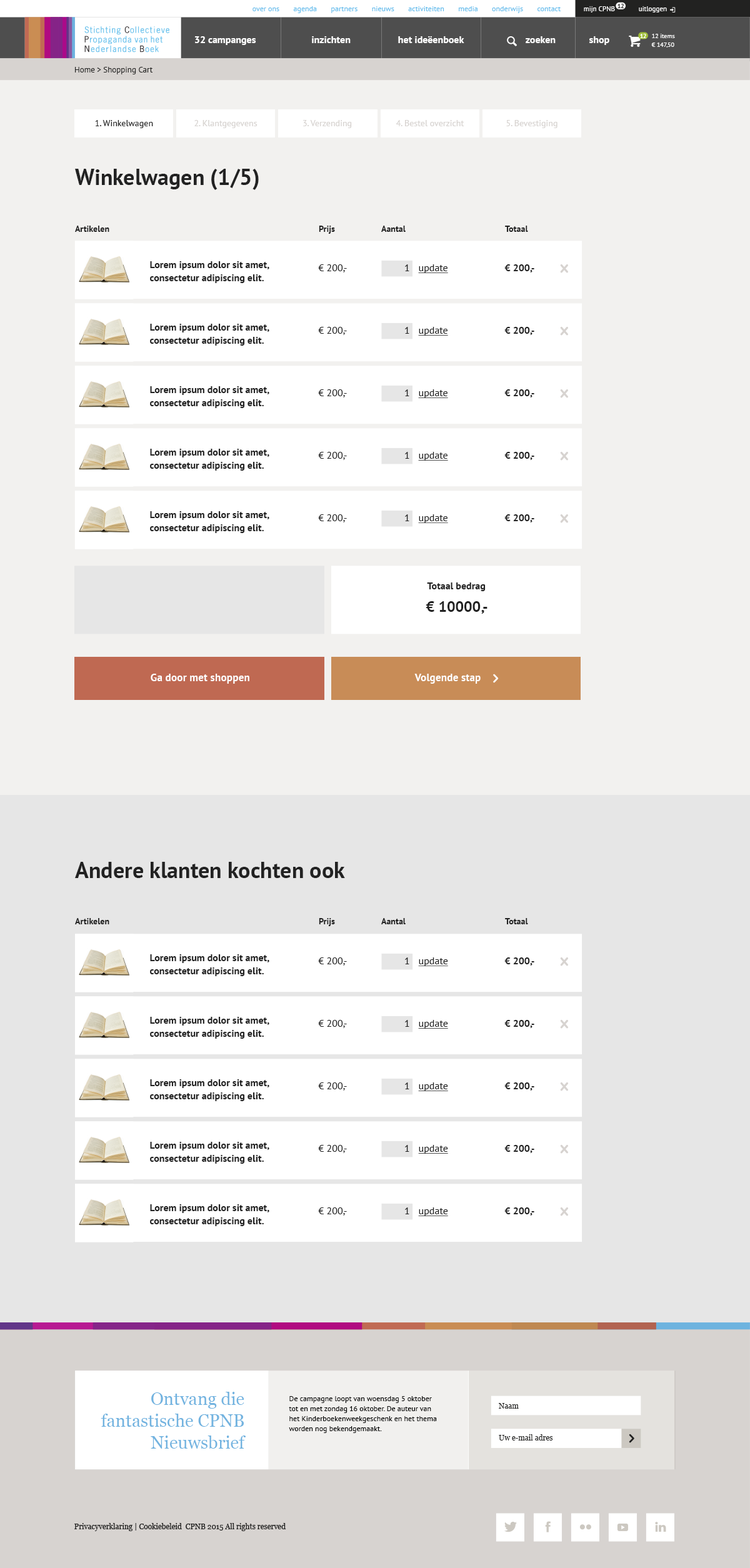
<style>
.page{position:relative;width:750px;height:1568px;background:#ffffff}
.page>*{position:absolute;margin:0}
.t1{font:6.2px "PTSans-Bold";letter-spacing:-0.05em;color:#222221}
.t2{font:7.5px "PTSans-Regular";color:#65bdec}
.t3{font:6.9px "PTSans-Regular";color:#ffffff}
.t4{font:10px "PTSans-Bold";color:#ffffff}
.t5{font:6.2px "PTSans-Bold";letter-spacing:-0.05em;color:#ffffff}
.t6{font:6.2px/8.7px "PTSans-Regular";color:#ffffff}
.t7{font:8.1px "PTSans-Regular";color:#222221}
.t8{font:8.7px "PTSans-Regular";color:#222222}
.t9{font:8.7px "PTSans-Regular";color:#d7d3d0}
.t10{font:22.5px "PTSans-Bold";color:#222222}
.t11{font:8.7px "PTSans-Bold";color:#222222}
.t12{font:10px/13.1px "PTSans-Bold";color:#222222}
.t13{font:10px "PTSans-Regular";color:#222222}
.t14{font:10px "PTSans-Regular";color:#222222;text-decoration:underline}
.t15{font:10px "PTSans-Bold";color:#222222}
.t16{font:10px/22.5px "PTSans-Bold";color:#222222}
.t17{font:15px/22.5px "PTSans-Bold";color:#222222}
.t18{font:10.9px "PTSans-Bold";color:#ffffff}
.t19{font:17.5px/21.9px "Georgia";color:#5daadc}
.t20{font:7.5px/10px "PTSans-Regular";color:#000000}
.t21{font:7.5px "Georgia";color:#222221}
</style>
<div class="page">
<p class="t1" style="left:617px;top:4px;width:7px;height:4px">12</p>
<p class="t2" style="left:252px;top:6px;width:309px;height:7px">over ons       agenda       partners       nieuws       activiteiten       media       onderwijs       contact</p>
<p class="t3" style="left:584px;top:6px;width:31px;height:6px">mijn CPNB</p>
<p class="t3" style="left:639px;top:6px;width:28px;height:6px">uitloggen</p>
<p class="t4" style="left:195px;top:36px;width:61px;height:9px">32 campanges</p>
<p class="t4" style="left:312px;top:36px;width:39px;height:7px">inzichten</p>
<p class="t4" style="left:398px;top:36px;width:66px;height:7px">het ideëenboek</p>
<p class="t4" style="left:526px;top:36px;width:30px;height:7px">zoeken</p>
<p class="t4" style="left:589px;top:36px;width:20px;height:9px">shop</p>
<p class="t5" style="left:640px;top:34px;width:6px;height:4px">12</p>
<p class="t6" style="left:651px;top:34px;width:24px;height:13px">12 items<br>€ 147,50</p>
<p class="t7" style="left:75px;top:67px;width:78px;height:7px">Home &gt; Shopping Cart</p>
<p class="t8" style="left:95px;top:120px;width:58px;height:8px">1. Winkelwagen</p>
<p class="t9" style="left:194px;top:120px;width:63px;height:8px">2. Klantgegevens</p>
<p class="t9" style="left:303px;top:120px;width:49px;height:8px">3. Verzending</p>
<p class="t9" style="left:396px;top:120px;width:68px;height:6px">4. Bestel overzicht</p>
<p class="t9" style="left:506px;top:120px;width:51px;height:8px">5. Bevestiging</p>
<p class="t10" style="left:75px;top:169px;width:184px;height:21px">Winkelwagen (1/5)</p>
<p class="t11" style="left:75px;top:226px;width:34px;height:6px">Artikelen</p>
<p class="t11" style="left:319px;top:226px;width:16px;height:8px">Prijs</p>
<p class="t11" style="left:381px;top:226px;width:25px;height:6px">Aantal</p>
<p class="t11" style="left:505px;top:226px;width:23px;height:6px">Totaal</p>
<p class="t12" style="left:150px;top:261px;width:119px;height:22px">Lorem ipsum dolor sit amet, <br>consectetur adipiscing elit.</p>
<p class="t13" style="left:318px;top:264px;width:29px;height:8px">€ 200,-</p>
<p class="t13" style="left:405px;top:264px;width:4px;height:7px">1</p>
<p class="t14" style="left:418px;top:264px;width:30px;height:9px">update</p>
<p class="t15" style="left:504px;top:264px;width:30px;height:8px">€ 200,-</p>
<p class="t12" style="left:150px;top:324px;width:119px;height:22px">Lorem ipsum dolor sit amet, <br>consectetur adipiscing elit.</p>
<p class="t13" style="left:318px;top:327px;width:29px;height:8px">€ 200,-</p>
<p class="t13" style="left:405px;top:327px;width:4px;height:7px">1</p>
<p class="t14" style="left:418px;top:327px;width:30px;height:9px">update</p>
<p class="t15" style="left:504px;top:327px;width:30px;height:8px">€ 200,-</p>
<p class="t12" style="left:150px;top:386px;width:119px;height:22px">Lorem ipsum dolor sit amet, <br>consectetur adipiscing elit.</p>
<p class="t13" style="left:318px;top:389px;width:29px;height:8px">€ 200,-</p>
<p class="t13" style="left:405px;top:389px;width:4px;height:7px">1</p>
<p class="t14" style="left:418px;top:389px;width:30px;height:9px">update</p>
<p class="t15" style="left:504px;top:389px;width:30px;height:8px">€ 200,-</p>
<p class="t12" style="left:150px;top:449px;width:119px;height:22px">Lorem ipsum dolor sit amet, <br>consectetur adipiscing elit.</p>
<p class="t13" style="left:318px;top:452px;width:29px;height:8px">€ 200,-</p>
<p class="t13" style="left:405px;top:452px;width:4px;height:7px">1</p>
<p class="t14" style="left:418px;top:452px;width:30px;height:9px">update</p>
<p class="t15" style="left:504px;top:452px;width:30px;height:8px">€ 200,-</p>
<p class="t12" style="left:150px;top:511px;width:119px;height:22px">Lorem ipsum dolor sit amet, <br>consectetur adipiscing elit.</p>
<p class="t13" style="left:318px;top:514px;width:29px;height:8px">€ 200,-</p>
<p class="t13" style="left:405px;top:514px;width:4px;height:7px">1</p>
<p class="t14" style="left:418px;top:514px;width:30px;height:9px">update</p>
<p class="t15" style="left:504px;top:514px;width:30px;height:8px">€ 200,-</p>
<p class="t16" style="left:426px;top:582px;width:61px;height:32px;text-align:center">Totaal bedrag<br><span class="t17">€ 10000,-</span></p>
<p class="t18" style="left:151px;top:674px;width:98px;height:10px">Ga door met shoppen</p>
<p class="t18" style="left:414px;top:674px;width:67px;height:10px">Volgende stap</p>
<p class="t10" style="left:75px;top:862px;width:270px;height:16px">Andere klanten kochten ook</p>
<p class="t11" style="left:75px;top:918px;width:34px;height:6px">Artikelen</p>
<p class="t11" style="left:319px;top:918px;width:16px;height:8px">Prijs</p>
<p class="t11" style="left:381px;top:918px;width:25px;height:6px">Aantal</p>
<p class="t11" style="left:505px;top:918px;width:23px;height:6px">Totaal</p>
<p class="t12" style="left:150px;top:954px;width:119px;height:22px">Lorem ipsum dolor sit amet, <br>consectetur adipiscing elit.</p>
<p class="t13" style="left:318px;top:957px;width:29px;height:9px">€ 200,-</p>
<p class="t13" style="left:405px;top:957px;width:4px;height:7px">1</p>
<p class="t14" style="left:418px;top:957px;width:30px;height:9px">update</p>
<p class="t15" style="left:504px;top:957px;width:30px;height:9px">€ 200,-</p>
<p class="t12" style="left:150px;top:1017px;width:119px;height:22px">Lorem ipsum dolor sit amet, <br>consectetur adipiscing elit.</p>
<p class="t13" style="left:318px;top:1020px;width:29px;height:8px">€ 200,-</p>
<p class="t13" style="left:405px;top:1020px;width:4px;height:7px">1</p>
<p class="t14" style="left:418px;top:1020px;width:30px;height:9px">update</p>
<p class="t15" style="left:504px;top:1020px;width:30px;height:8px">€ 200,-</p>
<p class="t12" style="left:150px;top:1079px;width:119px;height:22px">Lorem ipsum dolor sit amet, <br>consectetur adipiscing elit.</p>
<p class="t13" style="left:318px;top:1082px;width:29px;height:9px">€ 200,-</p>
<p class="t13" style="left:405px;top:1082px;width:4px;height:7px">1</p>
<p class="t14" style="left:418px;top:1082px;width:30px;height:9px">update</p>
<p class="t15" style="left:504px;top:1082px;width:30px;height:9px">€ 200,-</p>
<p class="t12" style="left:150px;top:1142px;width:119px;height:22px">Lorem ipsum dolor sit amet, <br>consectetur adipiscing elit.</p>
<p class="t13" style="left:318px;top:1145px;width:29px;height:8px">€ 200,-</p>
<p class="t13" style="left:405px;top:1145px;width:4px;height:7px">1</p>
<p class="t14" style="left:418px;top:1145px;width:30px;height:9px">update</p>
<p class="t15" style="left:504px;top:1145px;width:30px;height:8px">€ 200,-</p>
<p class="t12" style="left:150px;top:1204px;width:119px;height:22px">Lorem ipsum dolor sit amet, <br>consectetur adipiscing elit.</p>
<p class="t13" style="left:318px;top:1207px;width:29px;height:9px">€ 200,-</p>
<p class="t13" style="left:405px;top:1207px;width:4px;height:7px">1</p>
<p class="t14" style="left:418px;top:1207px;width:30px;height:9px">update</p>
<p class="t15" style="left:504px;top:1207px;width:30px;height:9px">€ 200,-</p>
<p class="t19" style="left:101px;top:1392px;width:145px;height:57px;text-align:right;opacity:0.9">Ontvang die<br>fantastische CPNB<br>Nieuwsbrief</p>
<p class="t20" style="left:289px;top:1396px;width:148px;height:37px">De campagne loopt van woensdag 5 oktober tot en met zondag 16 oktober. De auteur van het Kinderboekenweekgeschenk en het thema worden nog bekendgemaakt.</p>
<p class="t21" style="left:499px;top:1403px;width:20px;height:6px">Naam</p>
<p class="t21" style="left:499px;top:1434px;width:54px;height:7px">Uw e-mail adres</p>
<p class="t21" style="left:74px;top:1523px;width:212px;height:8px">Privacyverklaring | Cookiebeleid  CPNB 2015 All rights reserved</p>
</div>
